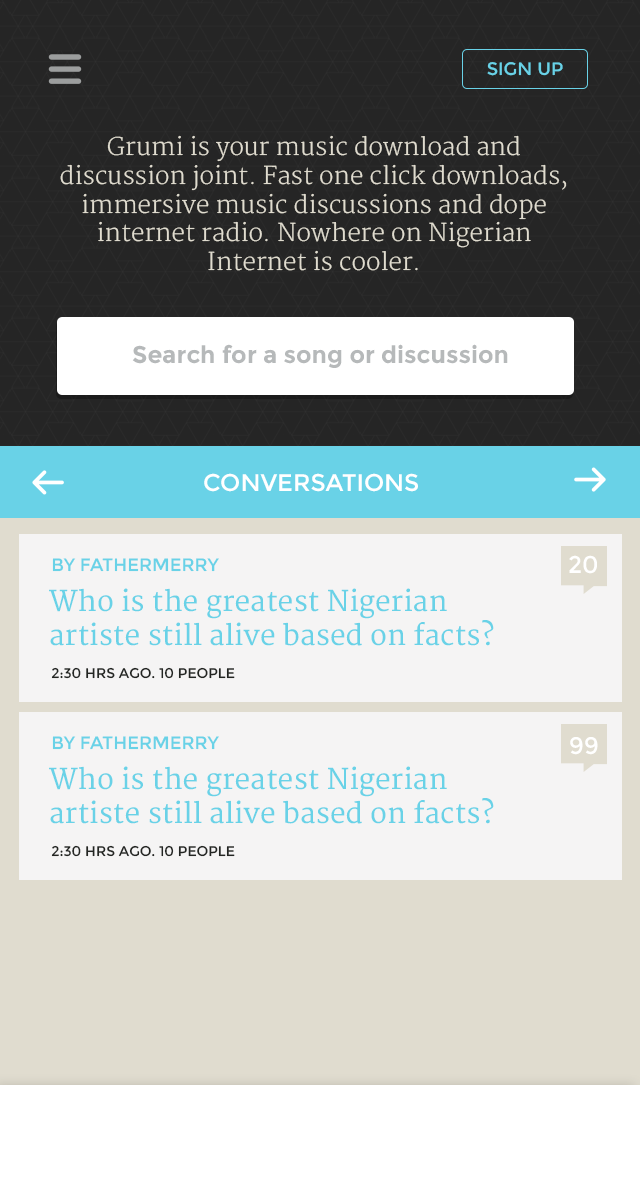
<style>
.page{position:relative;width:640px;height:1204px;background:#f5f4f4}
.page>*{position:absolute;margin:0}
.t1{font:18px "Montserrat-Regular";color:#69d2e7}
.t2{font:24px "Merriweather-Light";color:#e0dccf}
.t3{font:24px "Montserrat-Bold";color:#b6b9ba}
.t4{font:24px "Montserrat-Regular";color:#ffffff}
.t5{font:28px "Merriweather";color:#69d2e7}
.t6{font:14px "Montserrat-Regular";color:#232522}
</style>
<div class="page">
<p class="t1" style="left:487px;top:62px;width:76px;height:14px">SIGN UP</p>
<p class="t2" style="left:60px;top:135px;width:507px;height:136px;text-align:center">Grumi is your music download and discussion joint. Fast one click downloads, immersive music discussions and dope internet radio. Nowhere on Nigerian Internet is cooler.</p>
<p class="t3" style="left:132px;top:344px;width:376px;height:24px">Search for a song or discussion</p>
<p class="t4" style="left:204px;top:473px;width:214px;height:19px">CONVERSATIONS</p>
<p class="t1" style="left:52px;top:558px;width:167px;height:14px">BY FATHERMERRY</p>
<p class="t4" style="left:569px;top:555px;width:28px;height:19px">20</p>
<p class="t5" style="left:49px;top:588px;width:445px;height:58px">Who is the greatest Nigerian <br>artiste still alive based on facts?</p>
<p class="t6" style="left:51px;top:667px;width:184px;height:12px">2:30 HRS AGO. 10 PEOPLE</p>
<p class="t1" style="left:52px;top:736px;width:167px;height:14px">BY FATHERMERRY</p>
<p class="t4" style="left:570px;top:737px;width:28px;height:18px">99</p>
<p class="t5" style="left:49px;top:766px;width:445px;height:58px">Who is the greatest Nigerian <br>artiste still alive based on facts?</p>
<p class="t6" style="left:51px;top:845px;width:184px;height:12px">2:30 HRS AGO. 10 PEOPLE</p>
</div>
